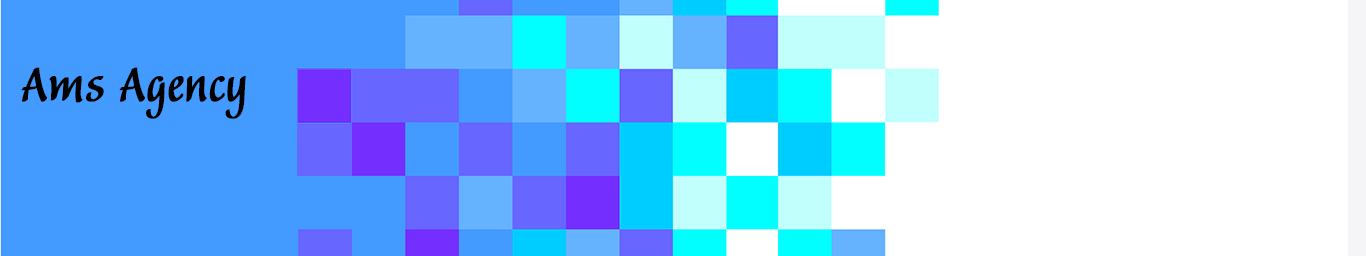
<style>
.page{position:relative;width:1366px;height:256px;background:#ffffff}
.page>*{position:absolute;margin:0}
.t1{font:60px "BalzanoStd";color:#000000;font-weight:bold}
</style>
<div class="page">
<p class="t1" style="left:21px;top:67px;width:225px;height:52px">Ams Agency</p>
</div>
